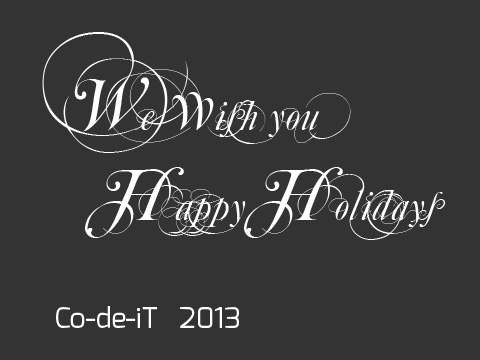
<style>
.page{position:relative;width:480px;height:360px;background:#333333}
.page>*{position:absolute;margin:0}
.t1{font:43.7px "MutluOrnamental";color:#ffffff}
.t2{font:75px "MutluOrnamental";color:#ffffff}
.t3{font:28.1px "Exo-Regular";color:#ffffff}
</style>
<div class="page">
<p class="t1" style="left:42px;top:32px;width:404px;height:208px"><span class="t2">W</span>e<span class="t2"> w</span>ish you<br><span class="t2">  H</span>appy<span class="t2"> H</span>olidays</p>
<p class="t3" style="left:56px;top:306px;width:183px;height:22px">Co-de-iT   2013</p>
</div>
